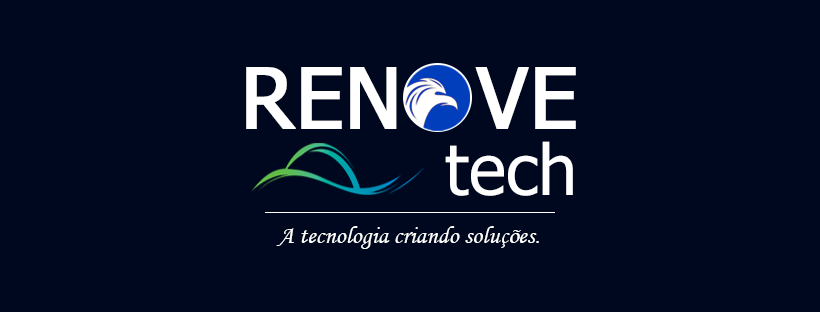
<style>
.page{position:relative;width:820px;height:312px;background:#000820}
.page>*{position:absolute;margin:0}
.t1{font:84px "Tahoma";color:#ffffff;font-weight:bold}
.t2{font:70px "Tahoma";color:#ffffff}
.t3{font:25.1px "MonotypeCorsiva";color:#ffffff}
</style>
<div class="page">
<p class="t1" style="left:246px;top:67px;width:151px;height:62px">REN</p>
<p class="t1" style="left:475px;top:67px;width:101px;height:62px">VE</p>
<p class="t2" style="left:445px;top:141px;width:128px;height:55px">tech</p>
<p class="t3" style="left:276px;top:226px;width:263px;height:23px">A tecnologia criando soluções.</p>
</div>
